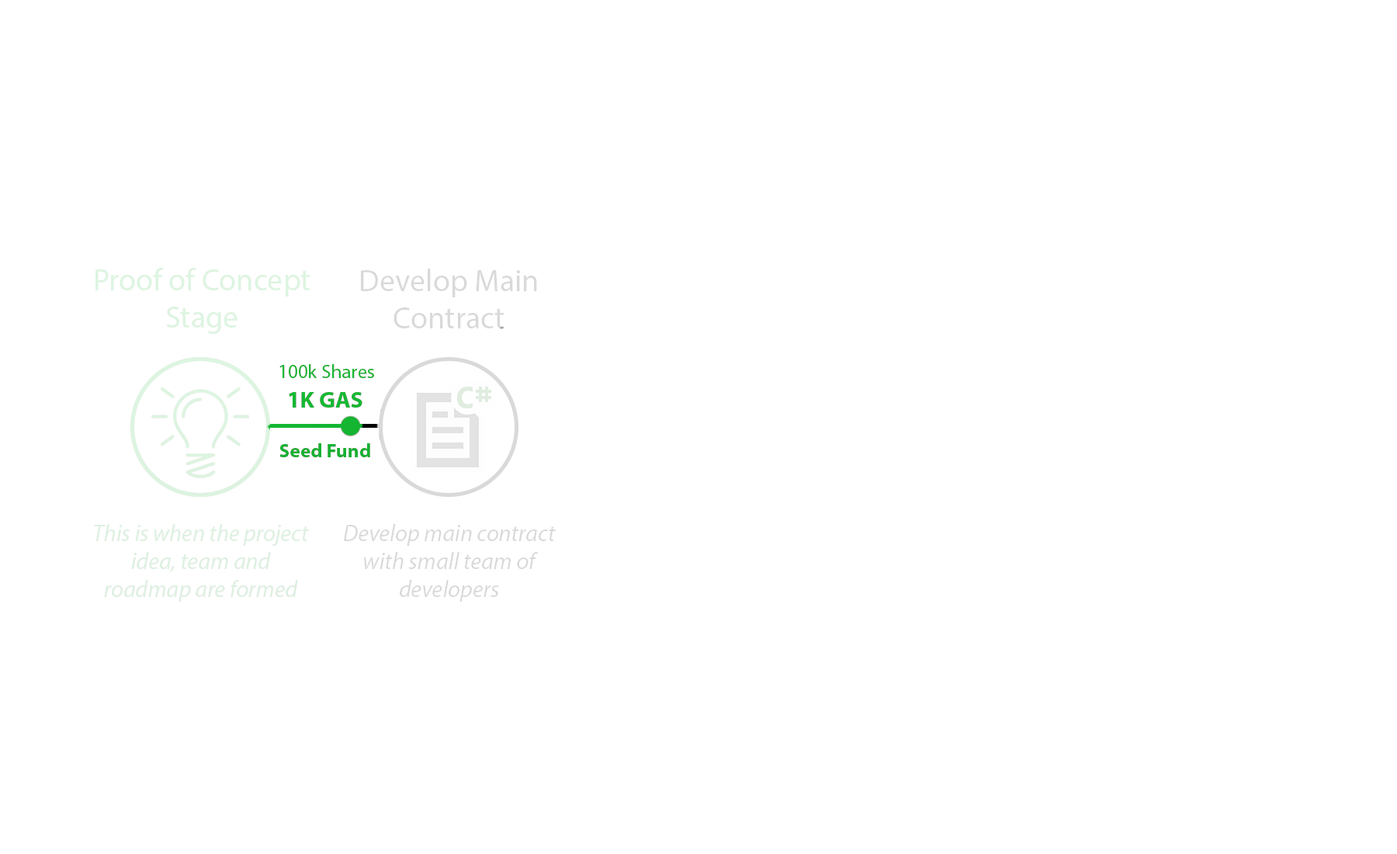
<style>
.page{position:relative;width:1397px;height:854px;background:#ffffff}
.page>*{position:absolute;margin:0}
.t1{font:31px "MyriadPro-Regular";color:#dcf5e1}
.t2{font:31px "MyriadPro-Regular";color:#d9d9d9}
.t3{font:19.4px "MyriadPro-Regular";color:#15bc34}
.t4{font:23.2px "MyriadPro-Bold";color:#15b833}
.t5{font:19.4px "MyriadPro-Bold";color:#14b331}
.t6{font:23.3px "MyriadPro-It";color:#dcf1e0}
.t7{font:23.3px "MyriadPro-It";color:#d9d9d9}
</style>
<div class="page">
<p class="t1" style="left:95px;top:268px;width:215px;height:66px;text-align:center">Proof of Concept Stage</p>
<p class="t2" style="left:361px;top:269px;width:176px;height:59px;text-align:center">Develop Main Contract</p>
<p class="t3" style="left:279px;top:364px;width:95px;height:14px">100k Shares</p>
<p class="t4" style="left:289px;top:392px;width:73px;height:15px">1K GAS</p>
<p class="t5" style="left:279px;top:443px;width:91px;height:14px">Seed Fund</p>
<p class="t6" style="left:94px;top:524px;width:215px;height:77px;text-align:center">This is when the project idea, team and roadmap are formed</p>
<p class="t7" style="left:343px;top:524px;width:213px;height:77px;text-align:center">Develop main contract with small team of developers</p>
</div>
